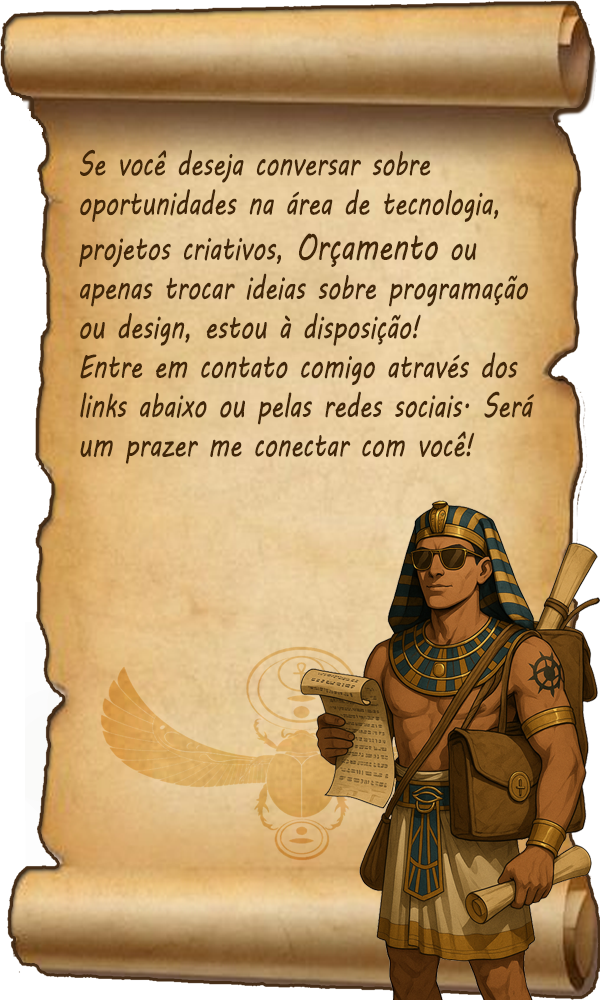
<style>
.page{position:relative;width:600px;height:1000px}
.page>*{position:absolute;margin:0}
.t1{font:32.8px "MVBoli";color:#412608;scale:0.75 1}
.t2{font:37.6px "MVBoli";color:#412608;scale:0.75 1}
</style>
<div class="page">
<p class="t1" style="left:79px;top:149px;width:455px;height:315px">Se você deseja conversar sobre oportunidades na área de tecnologia, projetos criativos, <span class="t2">Orçamento</span> ou apenas trocar ideias sobre programação ou design, estou à disposição!<br>Entre em contato comigo através dos links abaixo ou pelas redes sociais. Será um prazer me conectar com você!</p>
</div>
